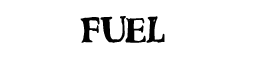
<style>
.page{position:relative;width:256px;height:64px;background:#ffffff}
.page>*{position:absolute;margin:0}
.t1{font:36px "CountryGold";color:#020202}
</style>
<div class="page">
<p class="t1" style="left:80px;top:16px;width:85px;height:27px">FUEL</p>
</div>
